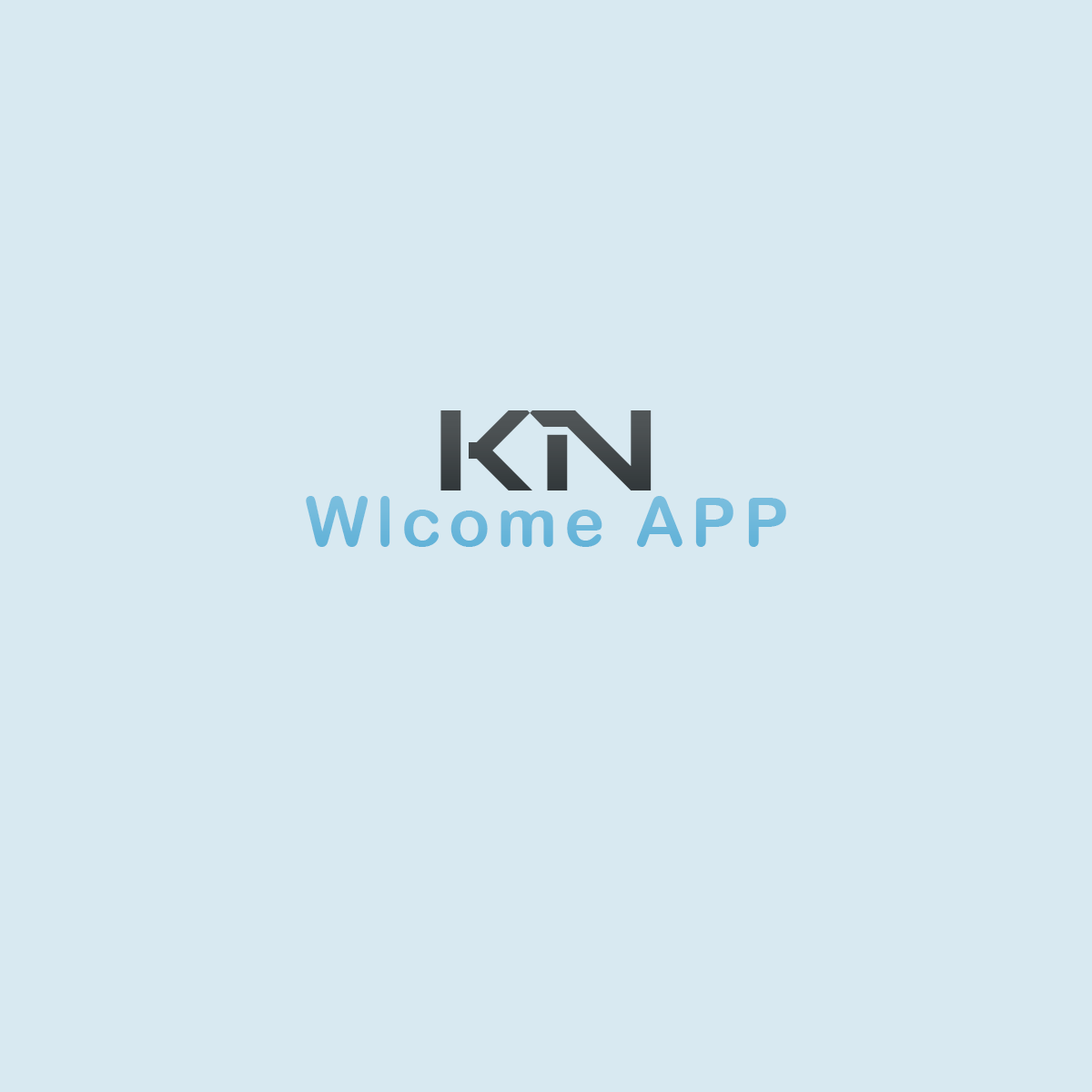
<style>
.page{position:relative;width:1092px;height:1092px;background:#d8e9f1}
.page>*{position:absolute;margin:0}
.t1{font:113.7px "PerfectDarkBRK)";letter-spacing:0.1em;color:#515658}
.t2{font:68.2px "ArialRoundedMTBold";letter-spacing:0.1em;color:#7abede}
</style>
<div class="page">
<p class="t1" style="left:440px;top:410px;width:212px;height:80px">KN</p>
<p class="t2" style="left:306px;top:496px;width:480px;height:51px">Wlcome APP</p>
</div>
